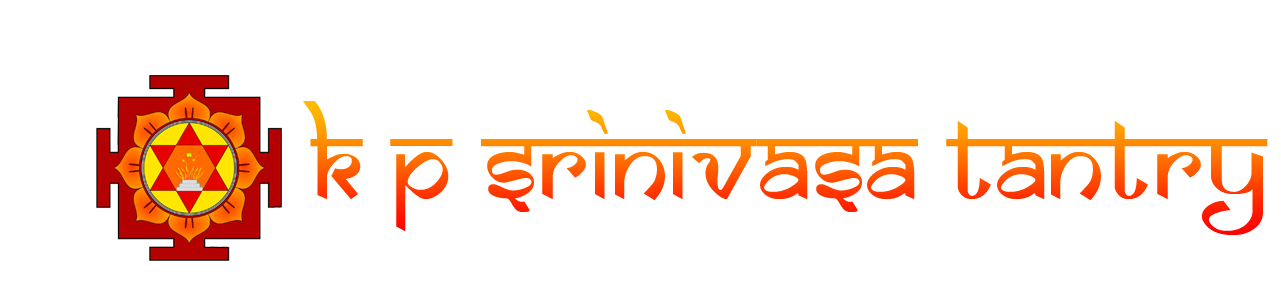
<style>
.page{position:relative;width:1281px;height:300px;background:#ffffff}
.page>*{position:absolute;margin:0}
.t1{font:111px "SamarkanNormal"}
</style>
<div class="page">
<p class="t1" style="left:303px;top:101px;width:965px;height:134px">K P SRINIVASA TANTRY</p>
</div>
